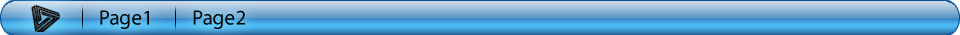
<style>
.page{position:relative;width:960px;height:35px}
.page>*{position:absolute;margin:0}
.t1{font:20.9px "MyriadPro-Regular";color:#000000}
</style>
<div class="page">
<p class="t1" style="left:100px;top:10px;width:145px;height:19px">Page1        Page2</p>
</div>
